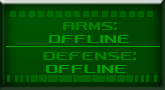
<style>
.page{position:relative;width:165px;height:90px}
.page>*{position:absolute;margin:0}
.t1{font:14px "AeromaticsSmallCapsNC";color:#008400}
.t2{font:14px "RobofanFree";color:#008400}
.t3{font:14px "AeromaticsSmallCapsNC";color:#009c00}
</style>
<div class="page">
<p class="t1" style="left:63px;top:22px;width:54px;height:8px">ARMS<span class="t2">:</span></p>
<p class="t3" style="left:49px;top:35px;width:80px;height:8px">OFFLINE</p>
<p class="t1" style="left:43px;top:52px;width:93px;height:8px">DEFENSE<span class="t2">:</span></p>
<p class="t3" style="left:46px;top:65px;width:80px;height:8px">OFFLINE</p>
</div>
